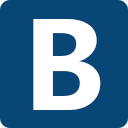
<style>
.page{position:relative;width:128px;height:128px;background:#074675}
.page>*{position:absolute;margin:0}
.t1{font:120px "MicrosoftYaHei-Bold";color:#ffffff}
</style>
<div class="page">
<p class="t1" style="left:33px;top:19px;width:68px;height:91px">B</p>
</div>
